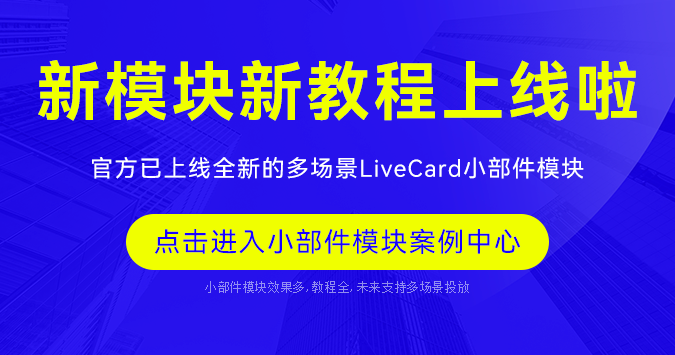
<style>
.page{position:relative;width:675px;height:355px}
.page>*{position:absolute;margin:0}
.t1{font:64.1px "HarmonyOS_Sans_SC_Bold";letter-spacing:0.05em;color:#f0ff00}
.t2{font:23.3px "HarmonyOS_Sans_SC";letter-spacing:0.05em;color:#ffffff}
.t3{font:27px "HarmonyOS_Sans_SC";letter-spacing:0.05em;color:#1800ff}
.t4{font:12px "SimSun";letter-spacing:0.05em;color:#938ef3}
</style>
<div class="page">
<p class="t1" style="left:38px;top:60px;width:599px;height:61px">新模块新教程上线啦</p>
<p class="t2" style="left:92px;top:157px;width:492px;height:22px">官方已上线全新的多场景LiveCard小部件模块</p>
<p class="t3" style="left:155px;top:228px;width:366px;height:26px">点击进入小部件模块案例中心</p>
<p class="t4" style="left:205px;top:281px;width:264px;height:12px">小部件模块效果多,教程全,未来支持多场景投放</p>
</div>
